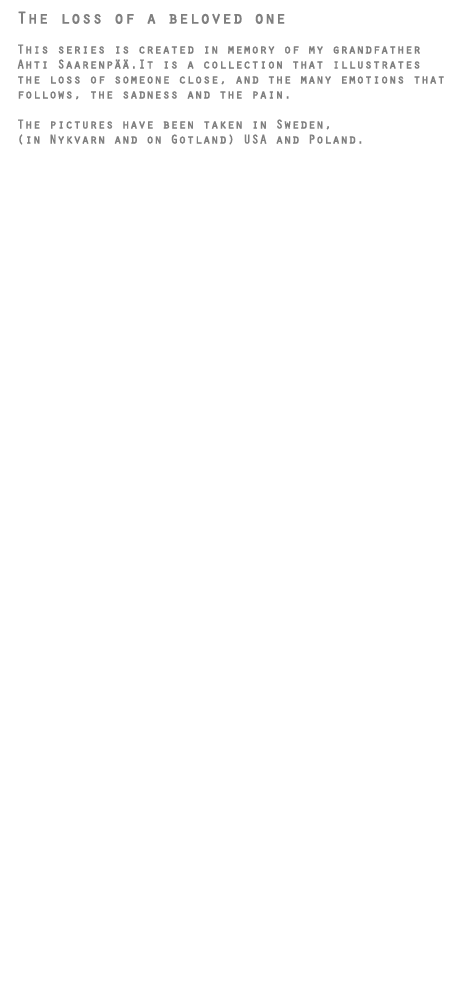
<style>
.page{position:relative;width:450px;height:1000px;background:#ffffff}
.page>*{position:absolute;margin:0}
.t1{font:12.5px "Orator-Regular";color:#7f7f7f;font-weight:bold}
.t2{font:16.7px "Orator-Regular";color:#7f7f7f;font-weight:bold}
</style>
<div class="page">
<p class="t1" style="left:17px;top:11px;width:427px;height:134px;text-align:right"><span class="t2">The loss of a beloved one<br></span><br>This series is created in memory of my grandfather <br>Ahti Saarenpää.It is a collection that illustrates <br>the loss of someone close, and the many emotions that<br>follows, the sadness and the pain.<br><br>The pictures have been taken in Sweden,<br>(in Nykvarn and on Gotland) USA and Poland.</p>
</div>
